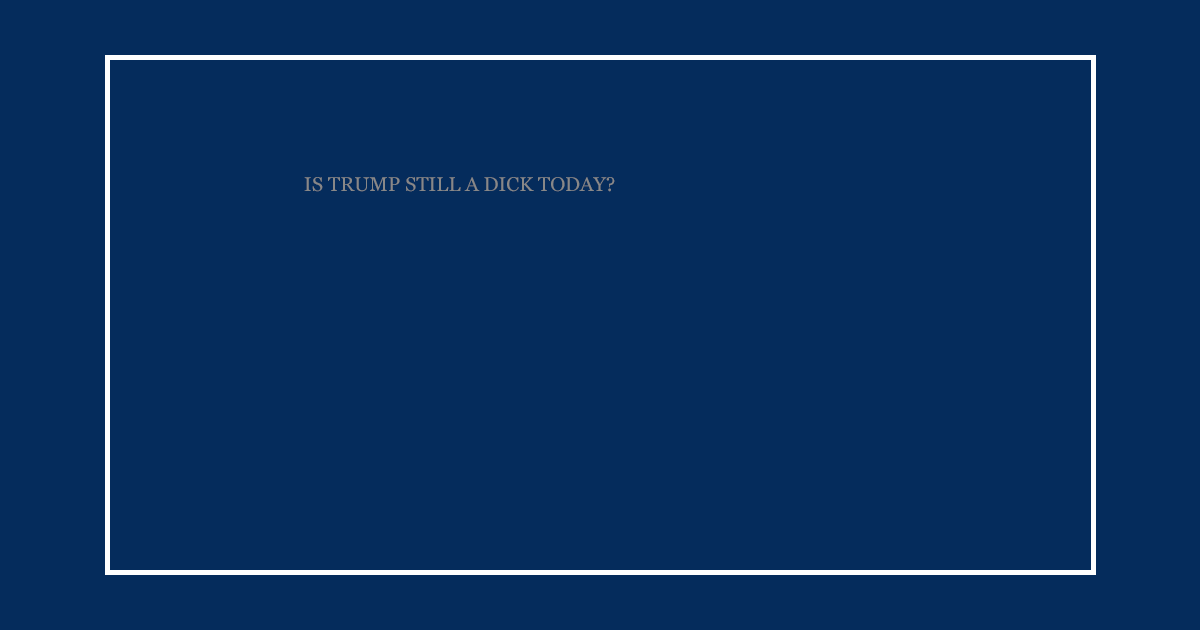
<style>
.page{position:relative;width:1200px;height:630px;background:#052c5c}
.page>*{position:absolute;margin:0}
.t1{font:20px "Georgia";color:#888888}
</style>
<div class="page">
<p class="t1" style="left:304px;top:177px;width:311px;height:15px">IS TRUMP STILL A DICK TODAY?</p>
</div>
